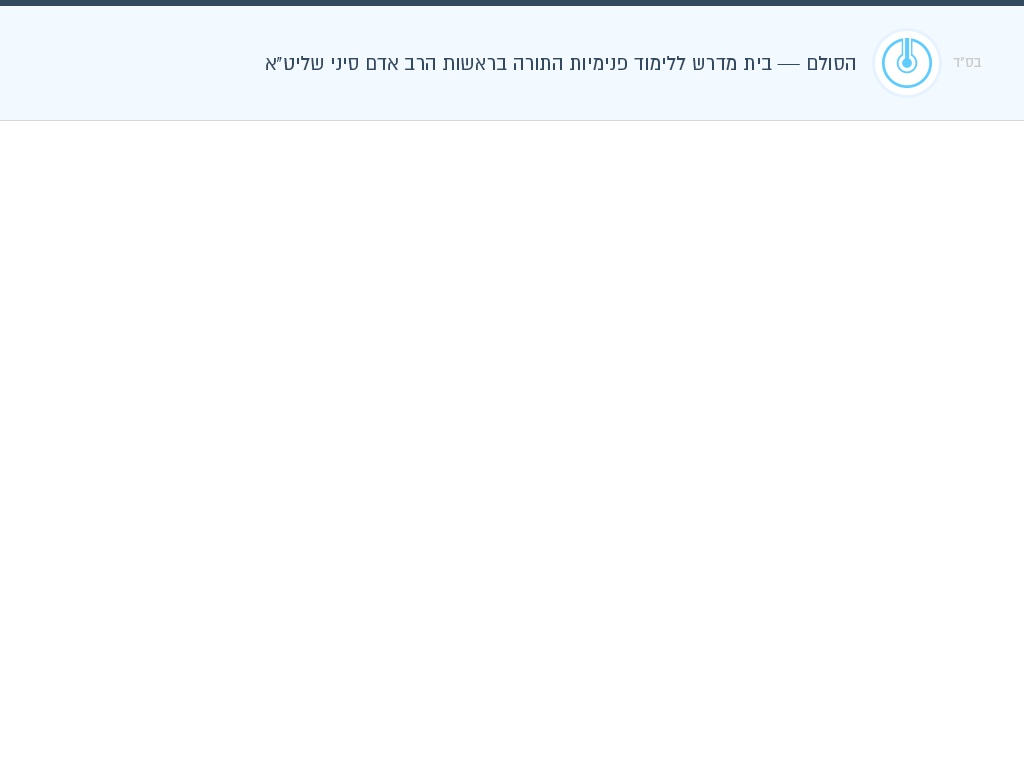
<style>
.page{position:relative;width:1024px;height:768px;background:#ffffff}
.page>*{position:absolute;margin:0}
.t1{font:22px "AlmoniDLAAA";color:#33495f}
.t2{font:16px "AlmoniDLAAA";color:#cccccc}
</style>
<div class="page">
<p class="t1" style="left:266px;top:56px;width:589px;height:14px">הסולם — בית מדרש ללימוד פנימיות התורה בראשות הרב אדם סיני שליט״א</p>
<p class="t2" style="left:953px;top:57px;width:29px;height:10px">בס״ד</p>
</div>
